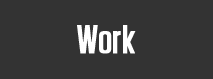
<style>
.page{position:relative;width:213px;height:79px;background:#333333}
.page>*{position:absolute;margin:0}
.t1{font:40px "Tungsten-Medium";color:#ffffff;font-weight:bold}
</style>
<div class="page">
<p class="t1" style="left:77px;top:25px;width:59px;height:29px">Work</p>
</div>
